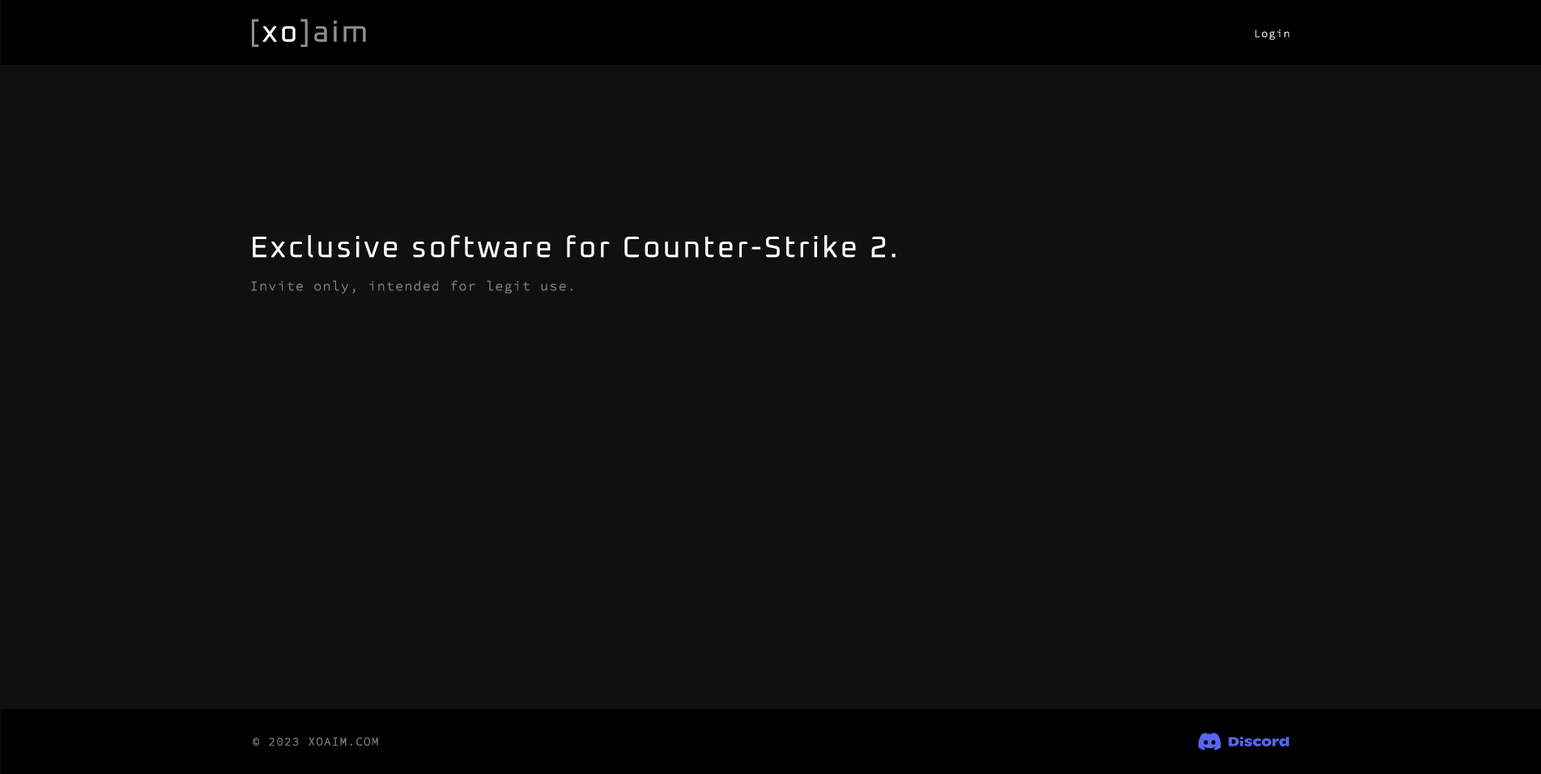
<style>
.page{position:relative;width:1541px;height:774px;background:#101010}
.page>*{position:absolute;margin:0}
.t1{font:29.2px "OxaniumRoman-Regular";letter-spacing:0.1em;color:#8f8f8f}
.t2{font:29.2px "OxaniumRoman-Regular";letter-spacing:0.1em;color:#ffffff}
.t3{font:10.5px "SourceCodePro-Light";letter-spacing:0.1em;color:#ffffff}
.t4{font:13px "SourceCodePro-Light";letter-spacing:0.1em;color:#8f8f8f}
.t5{font:11.3px "SourceCodePro-Light";letter-spacing:0.1em;color:#8f8f8f}
</style>
<div class="page">
<p class="t1" style="left:252px;top:19px;width:114px;height:28px">[<span class="t2">xo</span>]aim</p>
<p class="t3" style="left:1256px;top:29px;width:34px;height:11px">Login</p>
<p class="t2" style="left:253px;top:235px;width:643px;height:23px">Exclusive software for Counter-Strike 2.</p>
<p class="t4" style="left:251px;top:280px;width:322px;height:13px">Invite only, intended for legit use.</p>
<p class="t5" style="left:253px;top:737px;width:125px;height:8px">© 2023 XOAIM.COM</p>
</div>
